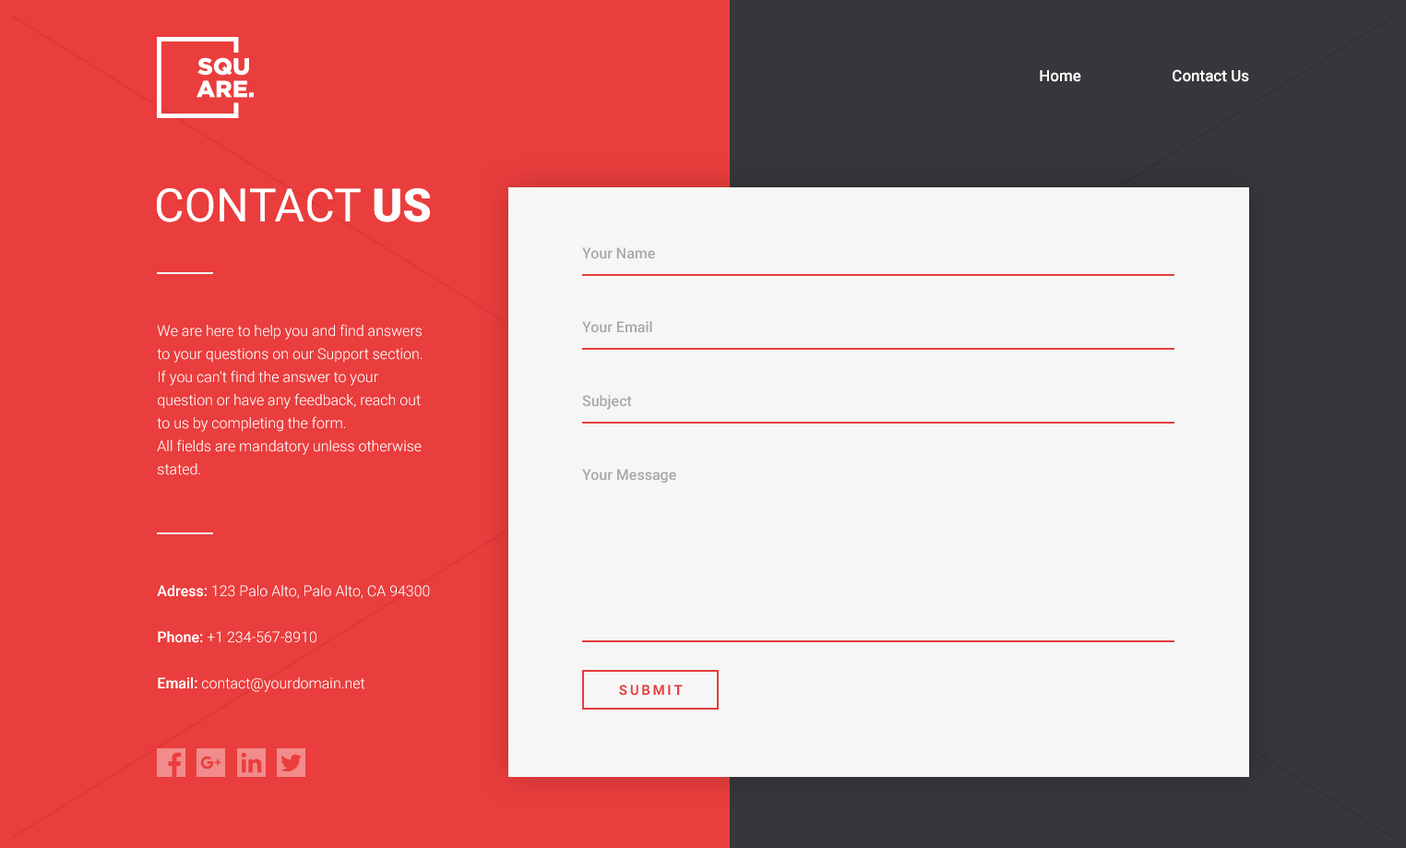
<style>
.page{position:relative;width:1406px;height:848px;background:#ea3d3d}
.page>*{position:absolute;margin:0}
.t1{font:15.7px "Roboto-Medium";color:#ffffff}
.t2{font:46.1px "Roboto-Regular";color:#ffffff}
.t3{font:46.1px "Roboto-Black";color:#ffffff}
.t4{font:14.8px "Roboto-Medium";color:#a7a8a9}
.t5{font:14.8px/23.1px "Roboto-Light";color:#ffffff}
.t6{font:14.8px/23.1px "Roboto-Medium";color:#ffffff}
.t7{font:13.8px "Roboto-Bold";letter-spacing:0.18em;color:#e73d3d;text-transform:uppercase}
</style>
<div class="page">
<p class="t1" style="left:1040px;top:69px;width:209px;height:13px">Home   Contact Us</p>
<p class="t2" style="left:157px;top:188px;width:273px;height:34px">CONTACT <span class="t3">US</span></p>
<p class="t4" style="left:582px;top:247px;width:73px;height:12px">Your Name</p>
<p class="t5" style="left:157px;top:324px;width:266px;height:151px">We are here to help you and find answers to your questions on our Support section.<br>If you can’t find the answer to your question or have any feedback, reach out to us by completing the form.<br>All fields are mandatory unless otherwise stated.</p>
<p class="t4" style="left:582px;top:321px;width:70px;height:12px">Your Email</p>
<p class="t4" style="left:582px;top:395px;width:50px;height:15px">Subject</p>
<p class="t4" style="left:582px;top:469px;width:94px;height:15px">Your Message</p>
<p class="t5" style="left:157px;top:585px;width:273px;height:107px"><span class="t6">Adress:</span> 123 Palo Alto, Palo Alto, CA 94300<br><br><span class="t6">Phone:</span> +1 234-567-8910<br><br><span class="t6">Email:</span> contact@yourdomain.net</p>
<p class="t7" style="left:619px;top:685px;width:64px;height:11px">SUBMIT</p>
</div>
